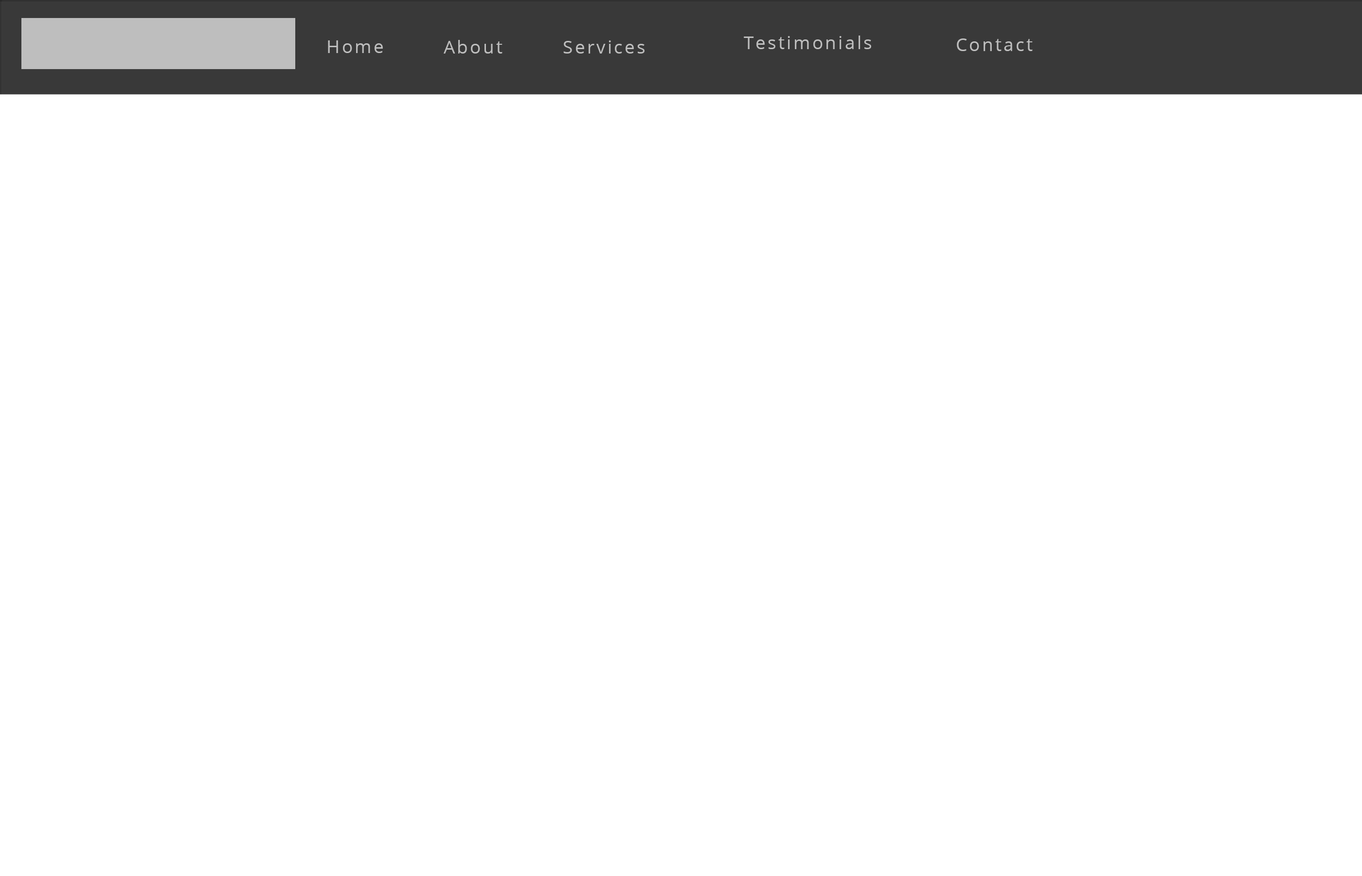
<style>
.page{position:relative;width:1362px;height:876px;background:#ffffff}
.page>*{position:absolute;margin:0}
.t1{font:17.8px "OpenSans";letter-spacing:0.12em;color:#bebebe}
</style>
<div class="page">
<p class="t1" style="left:328px;top:40px;width:55px;height:13px">Home</p>
<p class="t1" style="left:444px;top:40px;width:58px;height:14px">About</p>
<p class="t1" style="left:563px;top:40px;width:81px;height:14px">Services</p>
<p class="t1" style="left:744px;top:36px;width:127px;height:13px">Testimonials</p>
<p class="t1" style="left:957px;top:38px;width:76px;height:13px">Contact</p>
</div>
